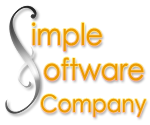
<style>
.page{position:relative;width:150px;height:125px;background:#ffffff}
.page>*{position:absolute;margin:0}
.t1{font:30px "CenturyGothic";color:#ea9a00;scale:0.9 1}
.t2{font:24px "CenturyGothic";color:#ea9a00;scale:0.9 1}
</style>
<div class="page">
<p class="t1" style="left:32px;top:22px;width:70px;height:29px">imple</p>
<p class="t1" style="left:44px;top:57px;width:100px;height:24px">oftware</p>
<p class="t2" style="left:41px;top:94px;width:105px;height:23px">Company</p>
</div>
